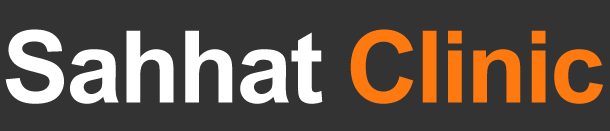
<style>
.page{position:relative;width:610px;height:131px;background:#333333}
.page>*{position:absolute;margin:0}
.t1{font:100px "Arial-BoldMT";letter-spacing:-0.025em;color:#ffffff}
.t2{font:100px "Arial-BoldMT";letter-spacing:-0.025em;color:#ff7911}
</style>
<div class="page">
<p class="t1" style="left:5px;top:29px;width:598px;height:75px">Sahhat <span class="t2">Clinic</span></p>
</div>
